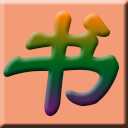
<style>
.page{position:relative;width:128px;height:128px;background:#f39b76}
.page>*{position:absolute;margin:0}
.t1{font:160px "LiSu";letter-spacing:0.06em;font-weight:bold;font-style:italic;scale:0.75 1}
</style>
<div class="page">
<p class="t1" style="left:3px;top:10px;width:117px;height:107px">书</p>
</div>
